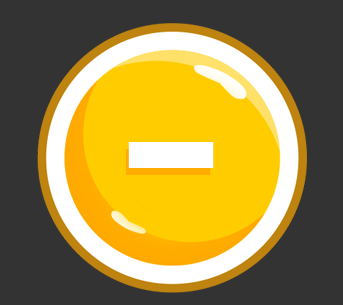
<style>
.page{position:relative;width:343px;height:305px;background:#333333}
.page>*{position:absolute;margin:0}
.t1{font:311.1px "ArialMT";color:#ffffff}
</style>
<div class="page">
<p class="t1" style="left:128px;top:142px;width:86px;height:26px">-</p>
</div>
